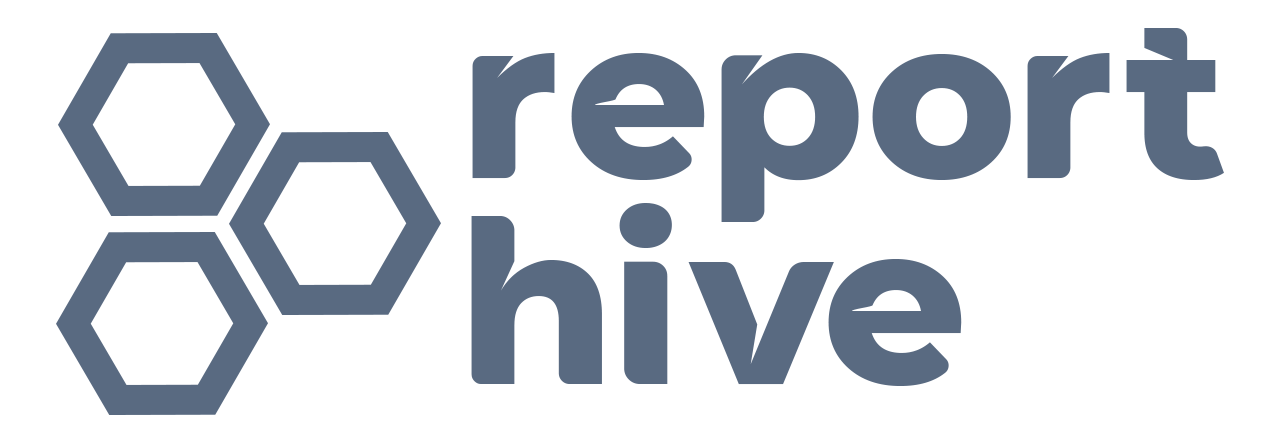
<style>
.page{position:relative;width:1280px;height:445px;background:#ffffff}
.page>*{position:absolute;margin:0}
.t1{font:286.6px "WallmanLoveBold";color:#596a81}
</style>
<div class="page">
<p class="t1" style="left:472px;top:28px;width:752px;height:194px">report</p>
<p class="t1" style="left:471px;top:203px;width:491px;height:183px">hive</p>
</div>
